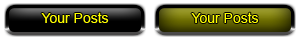
<style>
.page{position:relative;width:300px;height:40px;background:#ffffff}
.page>*{position:absolute;margin:0}
.t1{font:14px "ArialMT";color:#ffff00}
</style>
<div class="page">
<p class="t1" style="left:41px;top:12px;width:68px;height:11px">Your Posts</p>
<p class="t1" style="left:191px;top:12px;width:68px;height:11px">Your Posts</p>
</div>
